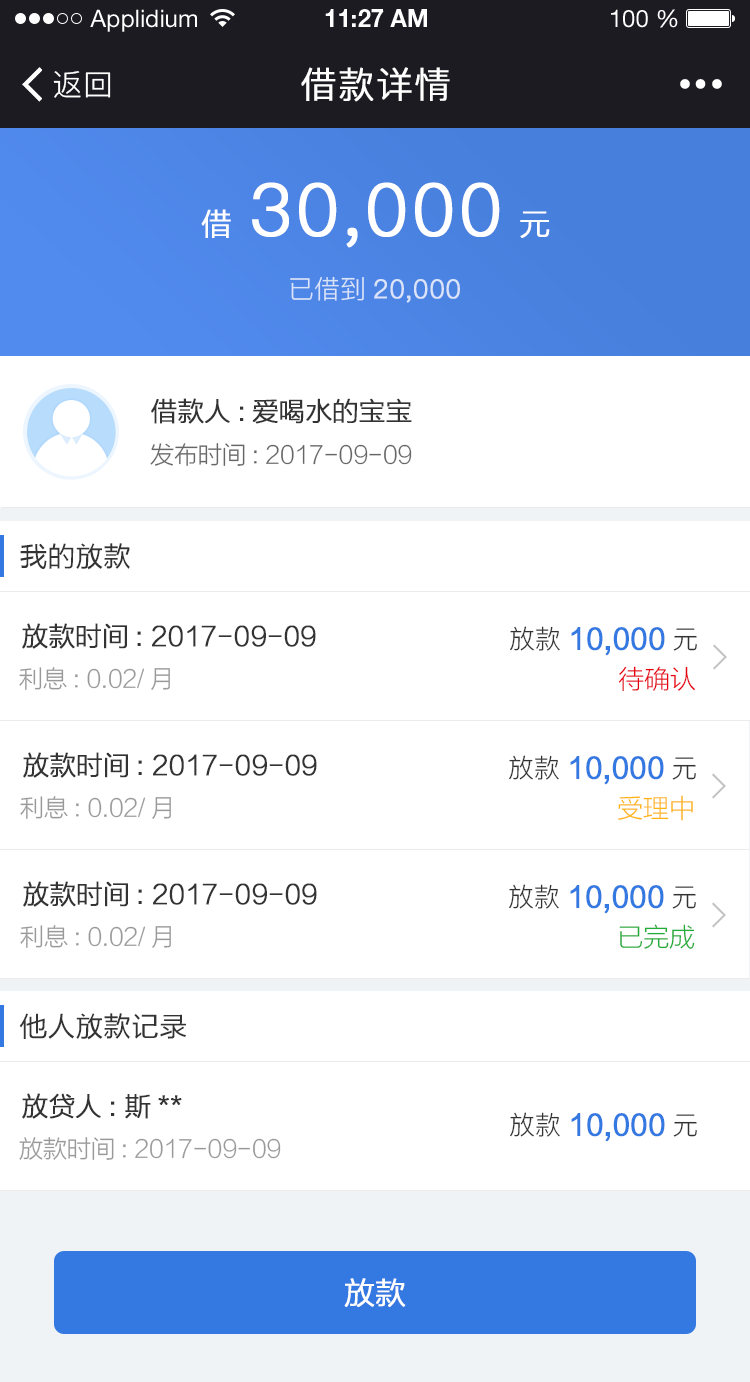
<style>
.page{position:relative;width:750px;height:1382px;background:#ffffff}
.page>*{position:absolute;margin:0}
.t1{font:24px "HelveticaNeueLTStd-Roman";color:#ffffff}
.t2{font:24px "HelveticaNeueLTStd-Bd";color:#ffffff}
.t3{font:30px "PingFang-SC-Regular";letter-spacing:0.025em;color:#ffffff}
.t4{font:36px "PingFang-SC-Regular";letter-spacing:0.025em;color:#ffffff;font-weight:bold}
.t5{font:72px "PingFang-SC-Regular";letter-spacing:0.025em;color:#ffffff;font-weight:bold}
.t6{font:30px "FZLTXHK--GBK1-0";letter-spacing:0.025em;color:#ffffff;font-weight:bold}
.t7{font:26px "PingFang-SC-Regular";color:#dae3f8;font-weight:bold}
.t8{font:26px "PingFang-SC-Regular";color:#dae3f8}
.t9{font:26px "FZLTXHK--GBK1-0";color:#333333;font-weight:bold}
.t10{font:24px "FZLTXHK--GBK1-0";color:#666666}
.t11{font:28px "FZLTH_YS_GBK";color:#333333}
.t12{font:28px "FZLTH_YS_GB18030";color:#3479e1;font-weight:bold}
.t13{font:26px "PingFang-SC-Regular";color:#333333}
.t14{font:24px "FZLTXHK--GBK1-0";color:#999999}
.t15{font:26px "FZLTXHK--GBK1-0";color:#e60012}
.t16{font:26px "FZLTXHK--GBK1-0";color:#ffb514}
.t17{font:26px "FZLTXHK--GBK1-0";color:#22ac38}
.t18{font:30px "FZLTXHK--GBK1-0";color:#ffffff;font-weight:bold}
</style>
<div class="page">
<p class="t1" style="left:90px;top:9px;width:107px;height:23px">Applidium</p>
<p class="t2" style="left:325px;top:9px;width:102px;height:18px">11:27 AM</p>
<p class="t1" style="left:611px;top:9px;width:67px;height:19px">100 %</p>
<p class="t3" style="left:53px;top:71px;width:58px;height:27px">返回</p>
<p class="t4" style="left:301px;top:67px;width:149px;height:35px">借款详情</p>
<p class="t5" style="left:252px;top:182px;width:248px;height:66px">30,000</p>
<p class="t6" style="left:201px;top:209px;width:30px;height:29px">借</p>
<p class="t6" style="left:520px;top:211px;width:30px;height:27px">元</p>
<p class="t7" style="left:290px;top:276px;width:170px;height:27px"><span class="t8">已借到</span>20,000</p>
<p class="t9" style="left:151px;top:398px;width:261px;height:26px">借款人:爱喝水的宝宝</p>
<p class="t10" style="left:150px;top:443px;width:262px;height:23px">发布时间: 2017-09-09</p>
<p class="t11" style="left:20px;top:543px;width:110px;height:27px">我的放款</p>
<p class="t9" style="left:22px;top:623px;width:294px;height:26px">放款时间: 2017-09-09</p>
<p class="t12" style="left:510px;top:626px;width:187px;height:30px"><span class="t13">放款</span>10,000<span class="t13">元</span></p>
<p class="t14" style="left:19px;top:667px;width:151px;height:23px">利息: 0.02/月</p>
<p class="t15" style="left:618px;top:666px;width:78px;height:25px">待确认</p>
<p class="t9" style="left:23px;top:752px;width:294px;height:26px">放款时间: 2017-09-09</p>
<p class="t12" style="left:509px;top:755px;width:187px;height:30px"><span class="t13">放款</span>10,000<span class="t13">元</span></p>
<p class="t14" style="left:20px;top:796px;width:151px;height:23px">利息: 0.02/月</p>
<p class="t16" style="left:618px;top:795px;width:75px;height:26px">受理中</p>
<p class="t9" style="left:23px;top:881px;width:294px;height:26px">放款时间: 2017-09-09</p>
<p class="t12" style="left:509px;top:884px;width:187px;height:30px"><span class="t13">放款</span>10,000<span class="t13">元</span></p>
<p class="t14" style="left:20px;top:925px;width:151px;height:23px">利息: 0.02/月</p>
<p class="t17" style="left:619px;top:924px;width:76px;height:25px">已完成</p>
<p class="t11" style="left:19px;top:1013px;width:168px;height:27px">他人放款记录</p>
<p class="t9" style="left:22px;top:1093px;width:160px;height:26px">放贷人: 斯**</p>
<p class="t12" style="left:510px;top:1112px;width:187px;height:30px"><span class="t13">放款</span>10,000<span class="t13">元</span></p>
<p class="t14" style="left:19px;top:1137px;width:262px;height:23px">放款时间: 2017-09-09</p>
<p class="t18" style="left:344px;top:1278px;width:62px;height:29px">放款</p>
</div>
